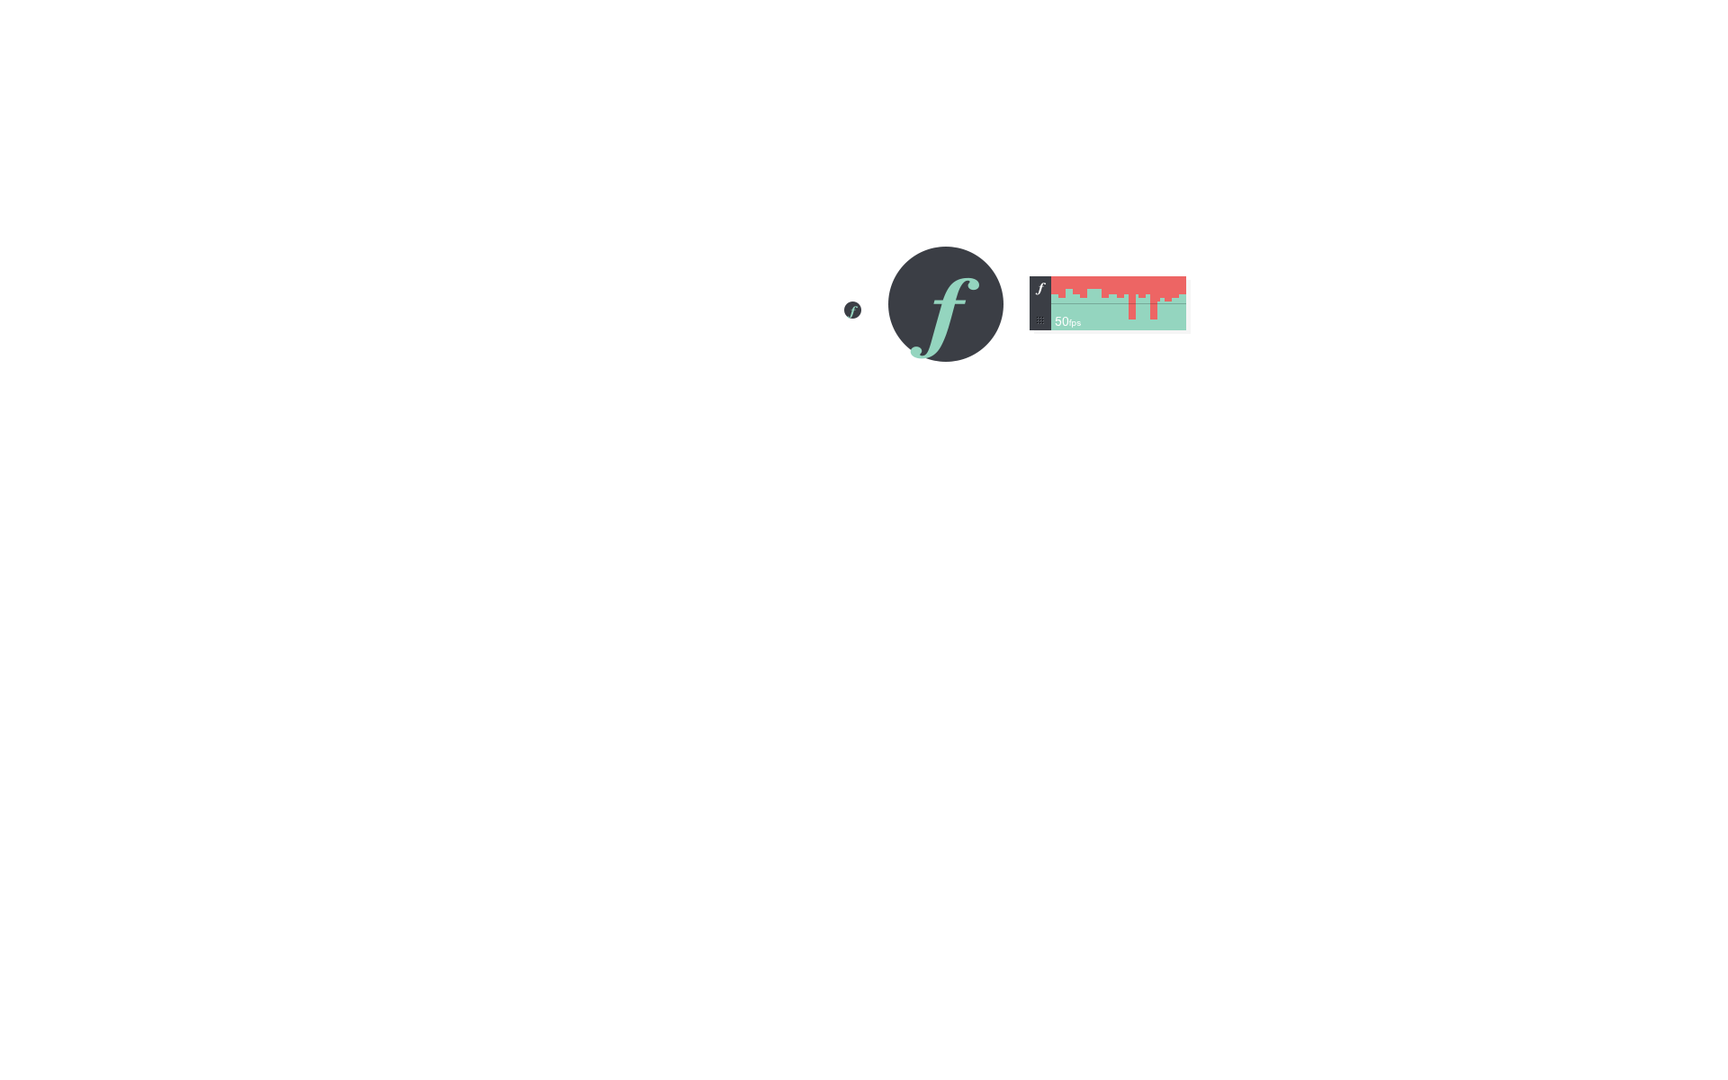
<style>
.page{position:relative;width:1728px;height:1080px;background:#ffffff}
.page>*{position:absolute;margin:0}
.t1{font:9px "ArialMT";color:#ffffff}
.t2{font:12.6px "ArialMT";color:#ffffff}
</style>
<div class="page">
<p class="t1" style="left:1055px;top:317px;width:26px;height:11px"><span class="t2">50</span>fps</p>
</div>
